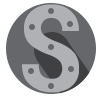
<style>
.page{position:relative;width:100px;height:100px;background:#ffffff}
.page>*{position:absolute;margin:0}
.t1{font:120px "RobotoCondensed-Bold";color:#afb1b4}
</style>
<div class="page">
<p class="t1" style="left:22px;top:4px;width:57px;height:89px">S</p>
</div>
